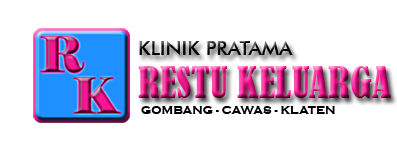
<style>
.page{position:relative;width:397px;height:142px;background:#ffffff}
.page>*{position:absolute;margin:0}
.t1{font:20px "FuturaBT-Medium";color:#000000}
.t2{font:40px "BernardMT-Condensed"}
.t3{font:12px "CopperplateGothic-Bold";color:#000000}
</style>
<div class="page">
<p class="t1" style="left:139px;top:41px;width:154px;height:14px">KLINIK PRATAMA</p>
<p class="t2" style="left:138px;top:66px;width:253px;height:32px">RESTU KELUARGA</p>
<p class="t3" style="left:141px;top:106px;width:194px;height:8px">GOMBANG - CAWAS - KLATEN</p>
</div>
